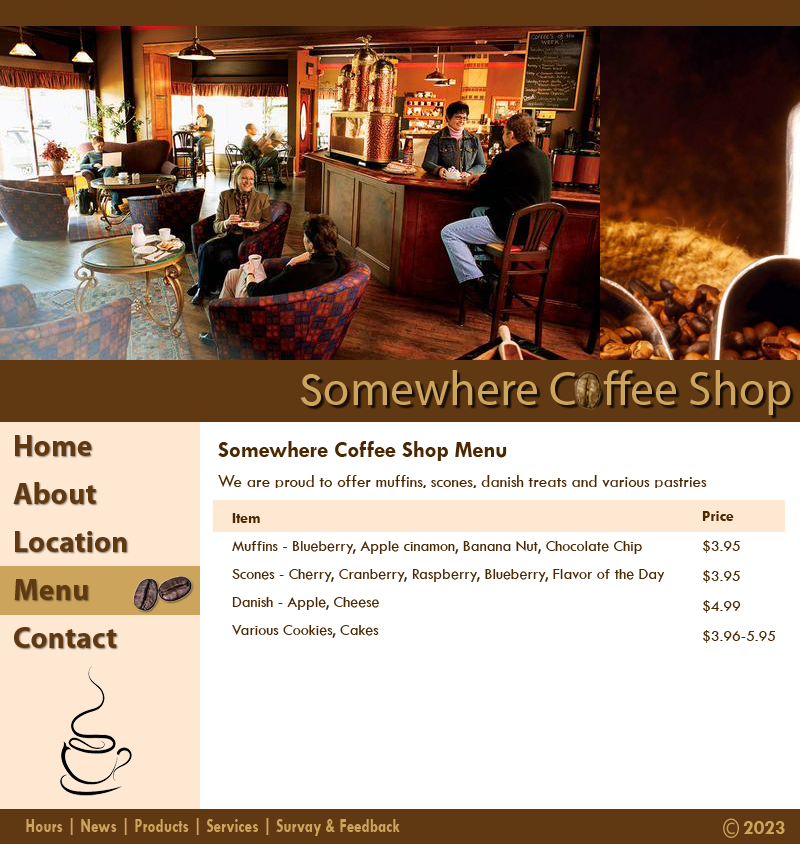
<style>
.page{position:relative;width:800px;height:844px;background:#ffffff}
.page>*{position:absolute;margin:0}
.t1{font:48px "MyriadPro-Regular";color:#cca45c}
.t2{font:48px "TwCenMT-Regular";color:#cca45c}
.t3{font:30px/48px "MyriadPro-Bold";color:#603913}
.t4{font:18px/15px "TwCenMT-Regular";color:#4b2802;scale:0.94 1}
.t5{font:24px/15px "TwCenMT-Bold";color:#4b2802;scale:0.94 1}
.t6{font:16px/14px "TwCenMT-Regular";color:#4b2802}
.t7{font:16px/15px "TwCenMT-Regular";color:#4b2802}
.t8{font:16px/6px "TwCenMT-Bold";color:#4b2802}
.t9{font:16px/15px "TwCenMT-Bold";color:#4b2802}
.t10{font:20px "TwCenMT-Bold";color:#cca45c;scale:0.77 1}
.t11{font:20px "TwCenMT-Bold";color:#cca45c}
</style>
<div class="page">
<p class="t1" style="left:300px;top:370px;width:491px;height:45px"><span class="t2">S</span>omewhere Coffee Shop</p>
<p class="t3" style="left:13px;top:435px;width:114px;height:213px">Home<br>About<br>Location<br>Menu<br>Contact</p>
<p class="t4" style="left:218px;top:441px;width:489px;height:49px"><span class="t5">Somewhere Coffee Shop Menu<br></span><br>We are proud to offer muffins, scones, danish treats and various pastries</p>
<p class="t6" style="left:232px;top:513px;width:433px;height:125px"><span class="t7">  <br></span><span class="t8">Item<br><br></span>Muffins - Blueberry, Apple cinamon, Banana Nut, Chocolate Chip<br><br>Scones - Cherry, Cranberry, Raspberry, Blueberry, Flavor of the Day<br><br>Danish - Apple, Cheese<br><br>Various Cookies, Cakes</p>
<p class="t7" style="left:702px;top:511px;width:73px;height:132px"><span class="t9">Price<br><br></span>$3.95<br><br>$3.95<br><br>$4.99<br><br>$3.96-5.95</p>
<p class="t10" style="left:26px;top:818px;width:374px;height:18px">Hours | News | Products | Services | Survay &amp; Feedback</p>
<p class="t11" style="left:743px;top:821px;width:42px;height:13px">2023</p>
</div>
